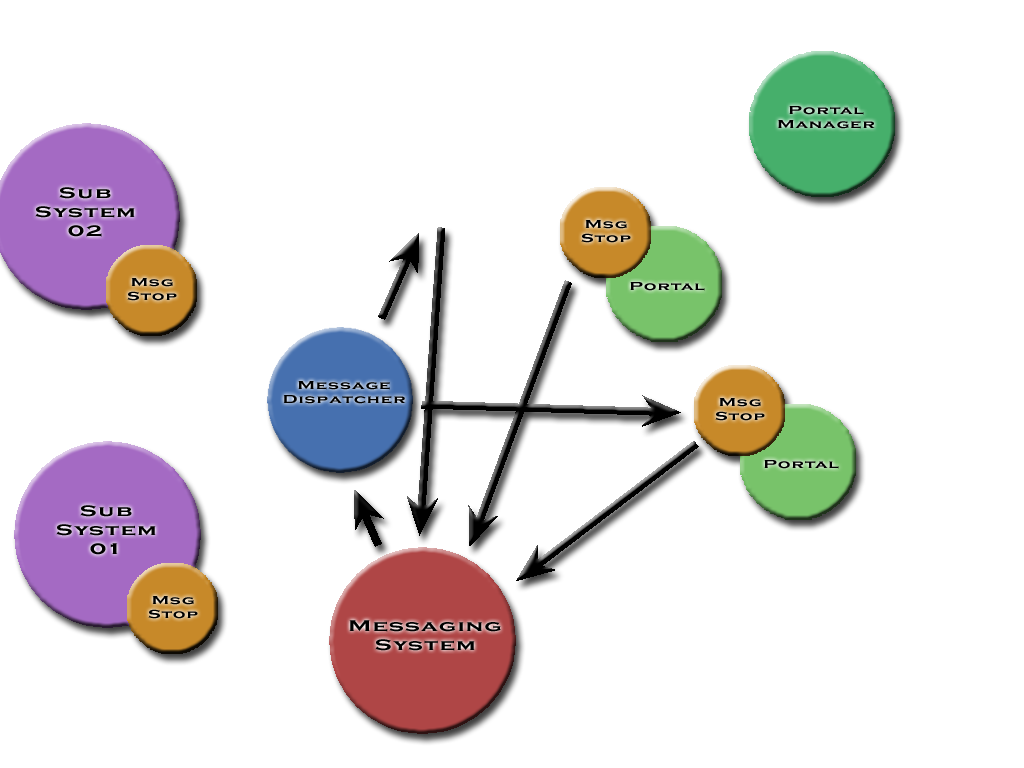
<style>
.page{position:relative;width:1024px;height:768px;background:#ffffff}
.page>*{position:absolute;margin:0}
.t1{font:12px "CopperplateGothic-Bold";letter-spacing:0.075em;color:#000000;scale:1.5 1}
.t2{font:16px "CopperplateGothic-Bold";letter-spacing:0.075em;color:#000000;scale:1.5 1}
</style>
<div class="page">
<p class="t1" style="left:778px;top:106px;width:97px;height:23px;text-align:center">Portal<br>Manager</p>
<p class="t2" style="left:35px;top:187px;width:100px;height:50px;text-align:center">Sub<br>System<br>02</p>
<p class="t1" style="left:581px;top:220px;width:50px;height:23px;text-align:center">Msg<br>Stop</p>
<p class="t1" style="left:127px;top:278px;width:50px;height:23px;text-align:center">Msg<br>Stop</p>
<p class="t1" style="left:630px;top:282px;width:75px;height:9px">Portal</p>
<p class="t1" style="left:283px;top:381px;width:123px;height:23px;text-align:center">Message<br>Dispatcher</p>
<p class="t1" style="left:715px;top:398px;width:50px;height:23px;text-align:center">Msg<br>Stop</p>
<p class="t1" style="left:764px;top:460px;width:75px;height:9px">Portal</p>
<p class="t2" style="left:56px;top:505px;width:100px;height:50px;text-align:center">Sub<br>System<br>01</p>
<p class="t1" style="left:148px;top:596px;width:50px;height:23px;text-align:center">Msg<br>Stop</p>
<p class="t2" style="left:349px;top:620px;width:152px;height:31px;text-align:center">Messaging<br>System</p>
</div>
